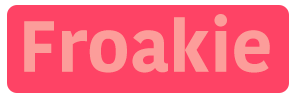
<style>
.page{position:relative;width:300px;height:100px;background:#fe4365}
.page>*{position:absolute;margin:0}
.t1{font:72px "KohinoorDevanagari-Bold";color:#fc9d9a}
</style>
<div class="page">
<p class="t1" style="left:24px;top:14px;width:246px;height:59px">Froakie</p>
</div>
